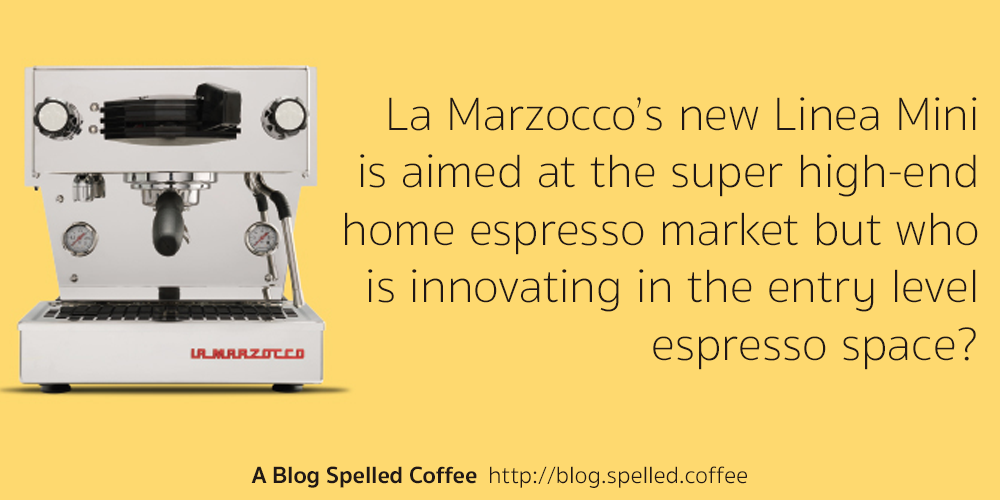
<style>
.page{position:relative;width:1000px;height:500px;background:#fed96f}
.page>*{position:absolute;margin:0}
.t1{font:48px "SukhumvitSet-Thin";color:#201816}
.t2{font:24px "SukhumvitSet-Light";color:#201816}
.t3{font:24px "SukhumvitSet-Bold";color:#201816}
</style>
<div class="page">
<p class="t1" style="left:345px;top:97px;width:633px;height:273px;text-align:right">La Marzocco’s new Linea Mini<br>is aimed at the super high-end<br>home espresso market but who<br>is innovating in the entry level<br>espresso space?</p>
<p class="t2" style="left:251px;top:466px;width:496px;height:22px"><span class="t3">A Blog Spelled Coffee  </span>http://blog.spelled.coffee</p>
</div>
